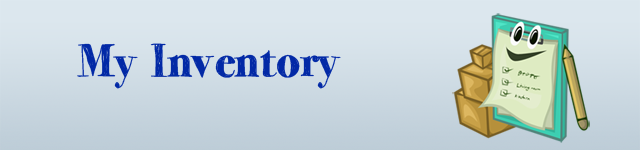
<style>
.page{position:relative;width:640px;height:150px}
.page>*{position:absolute;margin:0}
.t1{font:47.2px "MomsDiner";color:#0229a6}
</style>
<div class="page">
<p class="t1" style="left:77px;top:43px;width:264px;height:46px">My Inventory</p>
</div>
